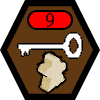
<style>
.page{position:relative;width:100px;height:100px;background:#603913}
.page>*{position:absolute;margin:0}
.t1{font:17.5px "KozGoPr6N-Regular";color:#000000}
</style>
<div class="page">
<p class="t1" style="left:46px;top:13px;width:8px;height:14px">9</p>
</div>
